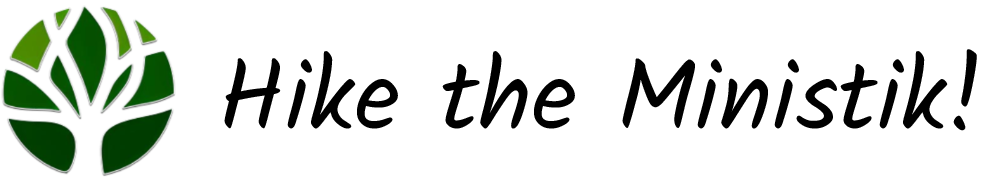
<style>
.page{position:relative;width:1000px;height:180px;background:#ffffff}
.page>*{position:absolute;margin:0}
.t1{font:99.6px "Kalam-Regular";color:#000000}
</style>
<div class="page">
<p class="t1" style="left:224px;top:49px;width:753px;height:82px">Hike the Ministik!</p>
</div>
